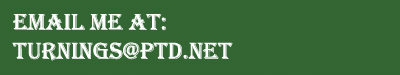
<style>
.page{position:relative;width:400px;height:75px;background:#336533}
.page>*{position:absolute;margin:0}
.t1{font:24px "Algerian";color:#ffffff}
</style>
<div class="page">
<p class="t1" style="left:12px;top:14px;width:221px;height:47px">Email me at:<br>turnings@ptd.net</p>
</div>
